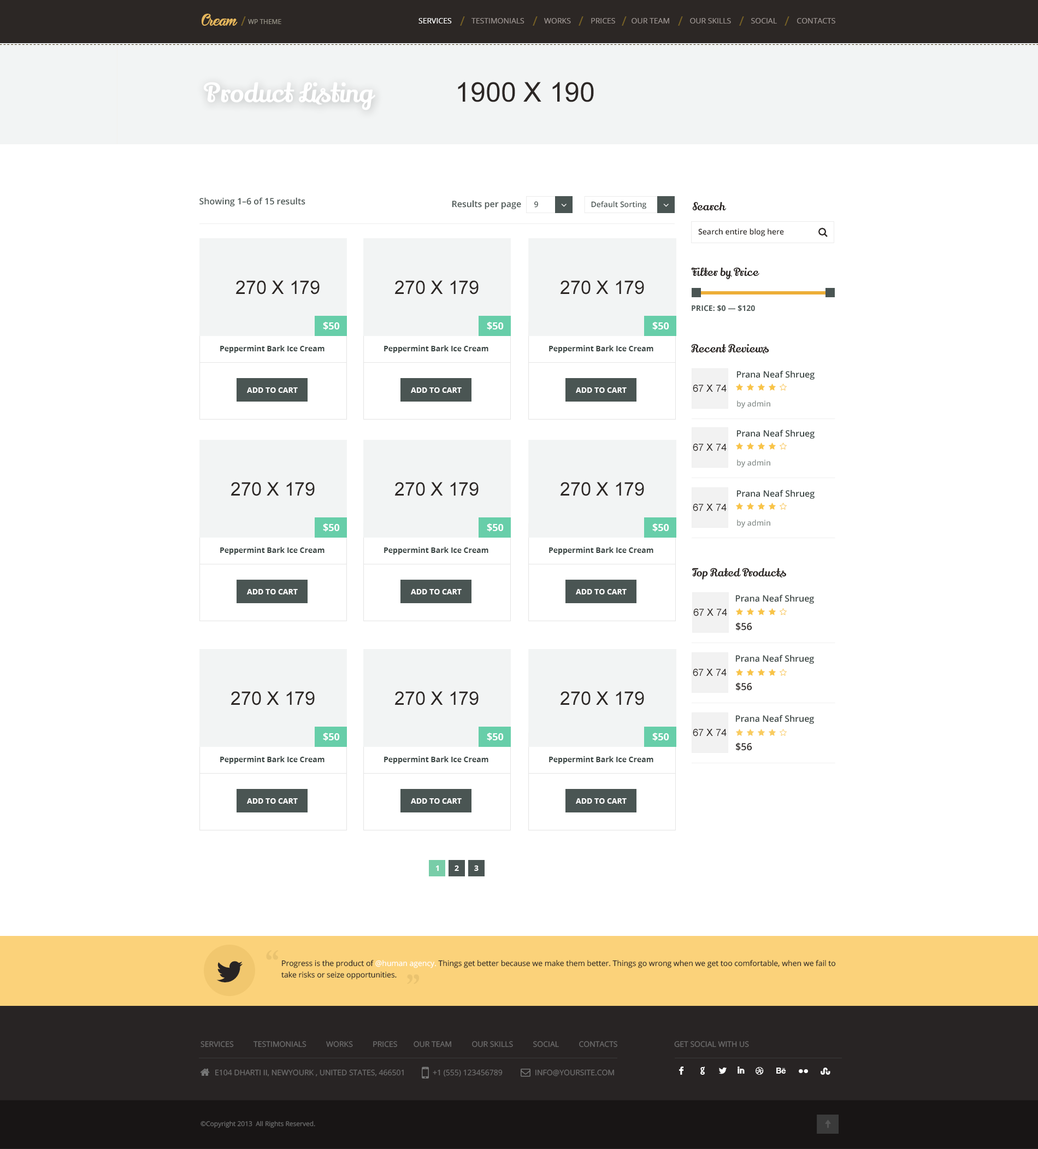
<style>
.page{position:relative;width:1038px;height:1149px;background:#ffffff}
.page>*{position:absolute;margin:0}
.t1{font:14.2px "Bira-PERSONALUSEONLY";color:#e5b65c}
.t2{font:13.1px "OpenSans";color:#786225;text-transform:uppercase}
.t3{font:6.6px "OpenSans";color:#959185;text-transform:uppercase}
.t4{font:7.6px "OpenSans";color:#9a928f;text-transform:uppercase}
.t5{font:7.6px "OpenSans";color:#ffffff;text-transform:uppercase}
.t6{font:26.2px "LilyScriptOne-Regular";color:#ffffff}
.t7{font:27.3px "ArialMT";color:#2c2725}
.t8{font:8.7px "OpenSans-Semibold";color:#4a5553}
.t9{font:7.6px "OpenSans-Semibold";color:#4a5553}
.t10{font:10.9px "LilyScriptOne-Regular";color:#2c2725}
.t11{font:7.6px "OpenSans-Semibold";color:#2c2725}
.t12{font:18.6px "ArialMT";color:#2c2725}
.t13{font:7.6px "OpenSans-Bold";letter-spacing:0.005em;color:#4a5553;text-transform:uppercase}
.t14{font:9.8px "OpenSans-Bold";color:#ffffff}
.t15{font:7.6px "OpenSans-Bold";color:#3a4543}
.t16{font:8.7px "OpenSans-Semibold";color:#3a4543}
.t17{font:7.6px "OpenSans-Bold";color:#ffffff;text-transform:uppercase}
.t18{font:9.8px "ArialMT";color:#2c2725}
.t19{font:7.6px "OpenSans-Semibold";color:#89918e}
.t20{font:9.8px "OpenSans-Semibold";color:#2c2725}
.t21{font:39.3px "PlantagenetCherokee";color:#eac36f}
.t22{font:44.2px "Socialico";color:#282424}
.t23{font:7.6px/11.5px "OpenSans";color:#282424}
.t24{font:7.6px "OpenSans";color:#6e6d6d;text-transform:uppercase}
.t25{font:13.1px "Socialico";color:#ffffff;text-transform:uppercase}
.t26{font:6.6px "OpenSans";color:#6d6d6d}
</style>
<div class="page">
<p class="t1" style="left:202px;top:14px;width:36px;height:12px">Cream</p>
<p class="t2" style="left:241px;top:16px;width:5px;height:10px">/</p>
<p class="t2" style="left:460px;top:16px;width:5px;height:10px">/</p>
<p class="t2" style="left:533px;top:16px;width:5px;height:10px">/</p>
<p class="t2" style="left:579px;top:16px;width:4px;height:10px">/</p>
<p class="t2" style="left:622px;top:16px;width:5px;height:10px">/</p>
<p class="t2" style="left:678px;top:16px;width:5px;height:10px">/</p>
<p class="t2" style="left:739px;top:16px;width:5px;height:10px">/</p>
<p class="t2" style="left:784px;top:16px;width:5px;height:10px">/</p>
<p class="t3" style="left:248px;top:19px;width:33px;height:5px">wp theme</p>
<p class="t4" style="left:418px;top:18px;width:417px;height:5px"><span class="t5">Services</span>          Testimonials          Works          Prices        Our Team          Our Skills          Social          Contacts</p>
<p class="t6" style="left:204px;top:82px;width:171px;height:28px">Product Listing</p>
<p class="t7" style="left:458px;top:82px;width:136px;height:20px">1900 X 190</p>
<p class="t8" style="left:199px;top:197px;width:106px;height:9px">Showing 1–6 of 15 results</p>
<p class="t8" style="left:452px;top:200px;width:69px;height:9px">Results per page</p>
<p class="t9" style="left:534px;top:201px;width:4px;height:7px">9</p>
<p class="t9" style="left:591px;top:201px;width:55px;height:8px">Default Sorting</p>
<p class="t10" style="left:692px;top:202px;width:34px;height:8px">Search</p>
<p class="t11" style="left:698px;top:228px;width:86px;height:9px">Search entire blog here</p>
<p class="t10" style="left:691px;top:267px;width:68px;height:12px">Filter by Price</p>
<p class="t12" style="left:236px;top:280px;width:84px;height:14px">270 X 179</p>
<p class="t12" style="left:395px;top:280px;width:84px;height:14px">270 X 179</p>
<p class="t12" style="left:560px;top:280px;width:84px;height:14px">270 X 179</p>
<p class="t13" style="left:692px;top:305px;width:63px;height:6px">Price: $0 — $120</p>
<p class="t14" style="left:323px;top:322px;width:17px;height:8px">$50</p>
<p class="t14" style="left:487px;top:322px;width:17px;height:8px">$50</p>
<p class="t14" style="left:652px;top:322px;width:17px;height:8px">$50</p>
<p class="t15" style="left:220px;top:345px;width:104px;height:8px">Peppermint Bark Ice Cream</p>
<p class="t15" style="left:384px;top:345px;width:104px;height:8px">Peppermint Bark Ice Cream</p>
<p class="t15" style="left:549px;top:345px;width:104px;height:8px">Peppermint Bark Ice Cream</p>
<p class="t10" style="left:691px;top:344px;width:78px;height:9px">Recent Reviews</p>
<p class="t16" style="left:737px;top:370px;width:78px;height:10px">Prana Neaf Shrueg</p>
<p class="t17" style="left:247px;top:387px;width:51px;height:6px">Add to Cart</p>
<p class="t17" style="left:411px;top:387px;width:51px;height:6px">Add to Cart</p>
<p class="t17" style="left:576px;top:387px;width:51px;height:6px">Add to Cart</p>
<p class="t18" style="left:693px;top:385px;width:34px;height:7px">67 X 74</p>
<p class="t19" style="left:737px;top:400px;width:33px;height:9px">by admin</p>
<p class="t16" style="left:737px;top:429px;width:78px;height:10px">Prana Neaf Shrueg</p>
<p class="t18" style="left:693px;top:444px;width:34px;height:7px">67 X 74</p>
<p class="t19" style="left:737px;top:459px;width:33px;height:9px">by admin</p>
<p class="t12" style="left:231px;top:482px;width:84px;height:14px">270 X 179</p>
<p class="t12" style="left:395px;top:482px;width:84px;height:14px">270 X 179</p>
<p class="t12" style="left:560px;top:482px;width:84px;height:14px">270 X 179</p>
<p class="t16" style="left:737px;top:489px;width:78px;height:10px">Prana Neaf Shrueg</p>
<p class="t18" style="left:693px;top:504px;width:34px;height:7px">67 X 74</p>
<p class="t19" style="left:737px;top:520px;width:33px;height:8px">by admin</p>
<p class="t14" style="left:323px;top:523px;width:17px;height:9px">$50</p>
<p class="t14" style="left:487px;top:523px;width:17px;height:9px">$50</p>
<p class="t14" style="left:652px;top:523px;width:17px;height:9px">$50</p>
<p class="t15" style="left:220px;top:547px;width:104px;height:7px">Peppermint Bark Ice Cream</p>
<p class="t15" style="left:384px;top:547px;width:104px;height:7px">Peppermint Bark Ice Cream</p>
<p class="t15" style="left:549px;top:547px;width:104px;height:7px">Peppermint Bark Ice Cream</p>
<p class="t10" style="left:692px;top:568px;width:94px;height:12px">Top Rated Products</p>
<p class="t17" style="left:247px;top:589px;width:51px;height:5px">Add to Cart</p>
<p class="t17" style="left:411px;top:589px;width:51px;height:5px">Add to Cart</p>
<p class="t17" style="left:576px;top:589px;width:51px;height:5px">Add to Cart</p>
<p class="t16" style="left:736px;top:594px;width:78px;height:10px">Prana Neaf Shrueg</p>
<p class="t18" style="left:693px;top:609px;width:34px;height:7px">67 X 74</p>
<p class="t20" style="left:736px;top:622px;width:16px;height:8px">$56</p>
<p class="t16" style="left:736px;top:654px;width:78px;height:10px">Prana Neaf Shrueg</p>
<p class="t18" style="left:693px;top:669px;width:34px;height:7px">67 X 74</p>
<p class="t20" style="left:736px;top:682px;width:16px;height:9px">$56</p>
<p class="t12" style="left:231px;top:691px;width:84px;height:14px">270 X 179</p>
<p class="t12" style="left:395px;top:691px;width:84px;height:14px">270 X 179</p>
<p class="t12" style="left:560px;top:691px;width:84px;height:14px">270 X 179</p>
<p class="t16" style="left:736px;top:715px;width:78px;height:9px">Prana Neaf Shrueg</p>
<p class="t14" style="left:323px;top:733px;width:17px;height:8px">$50</p>
<p class="t14" style="left:487px;top:733px;width:17px;height:8px">$50</p>
<p class="t14" style="left:652px;top:733px;width:17px;height:8px">$50</p>
<p class="t18" style="left:693px;top:729px;width:34px;height:7px">67 X 74</p>
<p class="t20" style="left:736px;top:742px;width:16px;height:9px">$56</p>
<p class="t15" style="left:220px;top:756px;width:104px;height:8px">Peppermint Bark Ice Cream</p>
<p class="t15" style="left:384px;top:756px;width:104px;height:8px">Peppermint Bark Ice Cream</p>
<p class="t15" style="left:549px;top:756px;width:104px;height:8px">Peppermint Bark Ice Cream</p>
<p class="t17" style="left:247px;top:798px;width:51px;height:6px">Add to Cart</p>
<p class="t17" style="left:411px;top:798px;width:51px;height:6px">Add to Cart</p>
<p class="t17" style="left:576px;top:798px;width:51px;height:6px">Add to Cart</p>
<p class="t17" style="left:436px;top:865px;width:3px;height:6px">1</p>
<p class="t17" style="left:455px;top:865px;width:4px;height:6px">2</p>
<p class="t17" style="left:474px;top:865px;width:5px;height:6px">3</p>
<p class="t21" style="left:266px;top:950px;width:12px;height:10px">“</p>
<p class="t22" style="left:216px;top:961px;width:27px;height:21px">L</p>
<p class="t23" style="left:281px;top:960px;width:555px;height:19px">Progress is the product of @human agency. Things get better because we make them better. Things go wrong when we get too comfortable, when we fail to <br>take risks or seize opportunities.</p>
<p class="t21" style="left:407px;top:974px;width:12px;height:10px;rotate:180deg">“</p>
<p class="t24" style="left:200px;top:1041px;width:417px;height:6px">Services          Testimonials          Works          Prices        Our Team          Our Skills          Social          Contacts</p>
<p class="t24" style="left:674px;top:1041px;width:75px;height:6px">Get Social With Us</p>
<p class="t24" style="left:215px;top:1069px;width:189px;height:7px">E104 Dharti II, Newyourk , United States, 466501</p>
<p class="t24" style="left:433px;top:1069px;width:70px;height:8px">+1 (555) 123456789</p>
<p class="t24" style="left:535px;top:1069px;width:79px;height:7px">info@yoursite.com</p>
<p class="t25" style="left:679px;top:1066px;width:4px;height:9px">F</p>
<p class="t25" style="left:700px;top:1066px;width:5px;height:9px">g</p>
<p class="t25" style="left:719px;top:1067px;width:8px;height:7px">l</p>
<p class="t25" style="left:737px;top:1066px;width:8px;height:7px">i</p>
<p class="t25" style="left:756px;top:1067px;width:8px;height:8px">d</p>
<p class="t25" style="left:776px;top:1067px;width:10px;height:6px">e</p>
<p class="t25" style="left:799px;top:1069px;width:9px;height:4px">n</p>
<p class="t25" style="left:821px;top:1067px;width:9px;height:8px">s</p>
<p class="t26" style="left:200px;top:1120px;width:115px;height:8px">©Copyright 2013  All Rights Reserved.</p>
</div>
